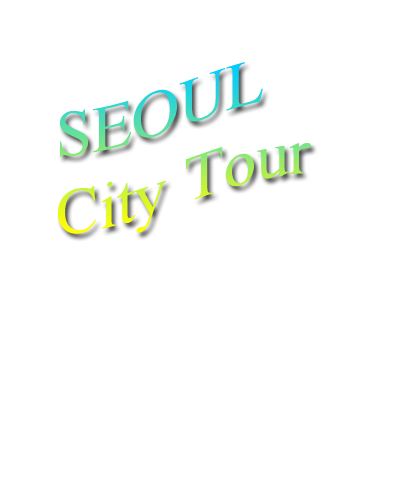
<style>
.page{position:relative;width:400px;height:500px;background:#ffffff}
.page>*{position:absolute;margin:0}
.t1{font:65px "TimesNewRomanPSMT"}
</style>
<div class="page">
<p class="t1" style="left:58px;top:62px;width:253px;height:172px">SEOUL<br>City Tour</p>
</div>
